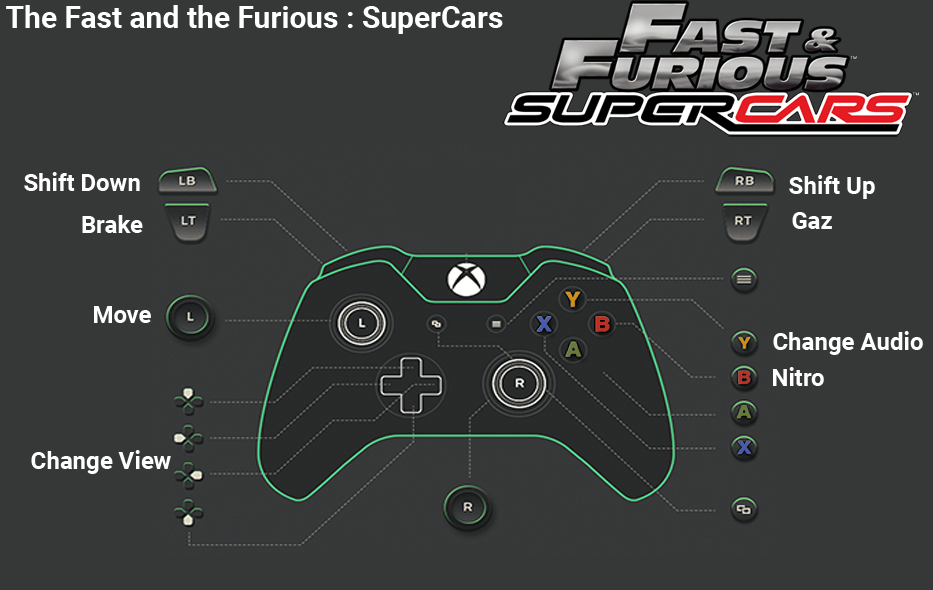
<style>
.page{position:relative;width:933px;height:590px;background:#363838}
.page>*{position:absolute;margin:0}
.t1{font:30px "Roboto-Bold";color:#ffffff}
.t2{font:24px "Roboto-Bold";color:#ffffff}
</style>
<div class="page">
<p class="t1" style="left:6px;top:5px;width:497px;height:29px">The Fast and the Furious : SuperCars</p>
<p class="t2" style="left:24px;top:172px;width:116px;height:19px">Shift Down</p>
<p class="t2" style="left:789px;top:175px;width:86px;height:24px">Shift Up</p>
<p class="t2" style="left:82px;top:215px;width:61px;height:18px">Brake</p>
<p class="t2" style="left:792px;top:212px;width:40px;height:17px">Gaz</p>
<p class="t2" style="left:94px;top:306px;width:57px;height:17px">Move</p>
<p class="t2" style="left:773px;top:331px;width:150px;height:24px">Change Audio</p>
<p class="t2" style="left:773px;top:367px;width:51px;height:19px">Nitro</p>
<p class="t2" style="left:31px;top:450px;width:140px;height:24px">Change View</p>
</div>
